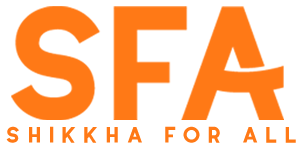
<style>
.page{position:relative;width:298px;height:151px;background:#ffffff}
.page>*{position:absolute;margin:0}
.t1{font:22.5px "Coyote-SemiBoldDEMO";letter-spacing:0.14em;color:#ff7916}
</style>
<div class="page">
<p class="t1" style="left:6px;top:126px;width:290px;height:17px">shikkha for all</p>
</div>
